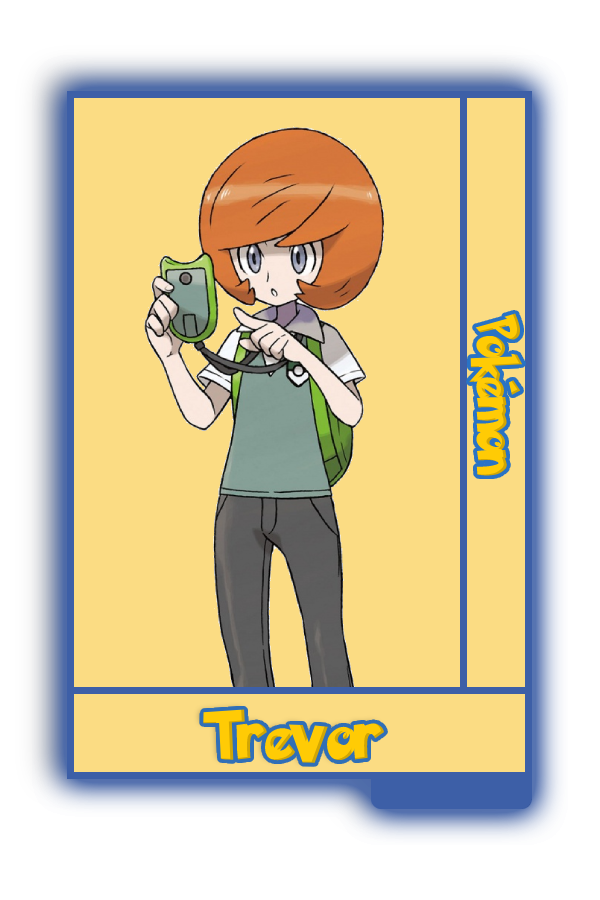
<style>
.page{position:relative;width:600px;height:900px;background:#fbdc83}
.page>*{position:absolute;margin:0}
.t1{font:48.8px "PokemonSolidNormal";color:#ffcb05;scale:0.8 1}
.t2{font:56.6px "PokemonSolidNormal";color:#ffcb05;scale:0.92 1}
</style>
<div class="page">
<p class="t1" style="left:469px;top:313px;width:54px;height:163px;rotate:90deg">Pokémon</p>
<p class="t2" style="left:203px;top:709px;width:182px;height:54px">Trevor</p>
</div>
